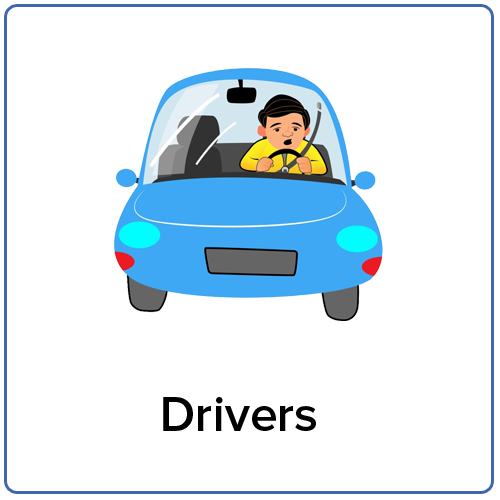
<style>
.page{position:relative;width:500px;height:500px;background:#ffffff}
.page>*{position:absolute;margin:0}
.t1{font:49.7px "ProximaNova-Semibold";color:#000000}
</style>
<div class="page">
<p class="t1" style="left:163px;top:397px;width:153px;height:34px">Drivers</p>
</div>
